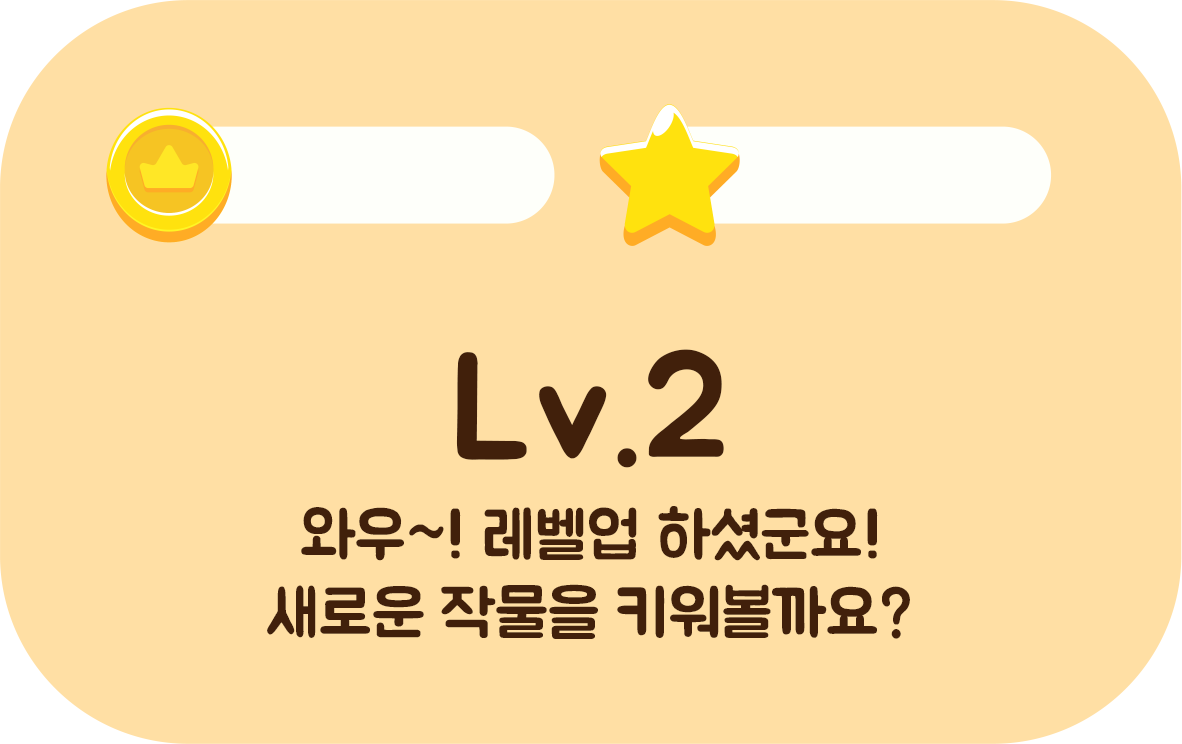
<style>
.page{position:relative;width:1182px;height:744px;background:#ffdfa4}
.page>*{position:absolute;margin:0}
.t1{font:150px "BMJUA";color:#42210b}
.t2{font:64.6px "BMJUA";color:#42210b}
</style>
<div class="page">
<p class="t1" style="left:456px;top:349px;width:268px;height:119px">Lv.2</p>
<p class="t2" style="left:267px;top:506px;width:643px;height:133px;text-align:center">와우~! 레벨업 하셨군요!<br>새로운 작물을 키워볼까요?</p>
</div>
